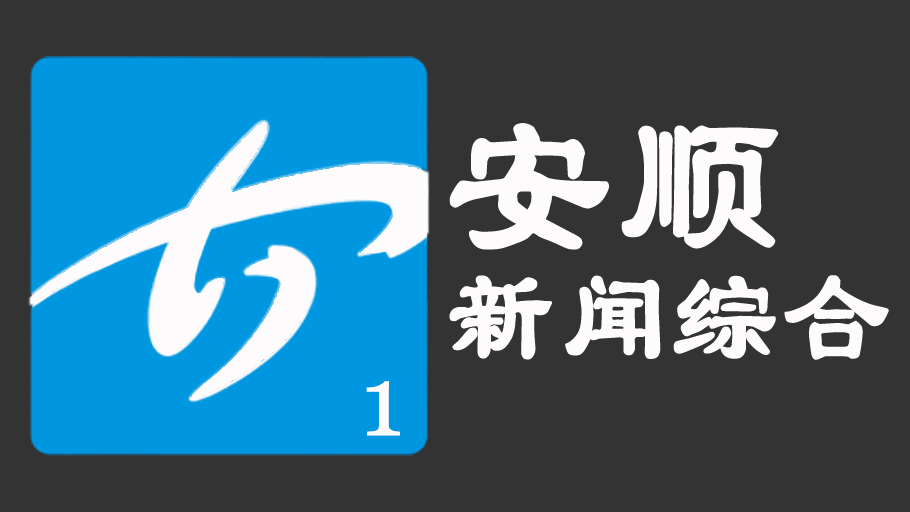
<style>
.page{position:relative;width:910px;height:512px;background:#333333}
.page>*{position:absolute;margin:0}
.t1{font:112px/160px "HYf0gj";color:#fdfbfb}
.t2{font:170px/160px "HYf0gj";color:#fdfbfb}
.t3{font:100px "Georgia";color:#fdfbfb}
</style>
<div class="page">
<p class="t1" style="left:449px;top:123px;width:440px;height:237px"><span class="t2">安顺<br></span>新闻综合</p>
<p class="t3" style="left:366px;top:381px;width:34px;height:55px">1</p>
</div>
